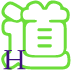
<style>
.page{position:relative;width:72px;height:72px;background:#ffffff}
.page>*{position:absolute;margin:0}
.t1{font:72px "STCaiyun";color:#6cdd3a}
.t2{font:30px "STFangsong";color:#3d107b}
</style>
<div class="page">
<p class="t1" style="left:1px;top:0px;width:70px;height:70px">道</p>
<p class="t2" style="left:3px;top:50px;width:23px;height:20px">H</p>
</div>
